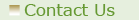
<style>
.page{position:relative;width:139px;height:20px;background:#e6efde}
.page>*{position:absolute;margin:0}
.t1{font:16.7px "Verdana";color:#669933}
</style>
<div class="page">
<p class="t1" style="left:24px;top:4px;width:91px;height:12px">Contact Us</p>
</div>
